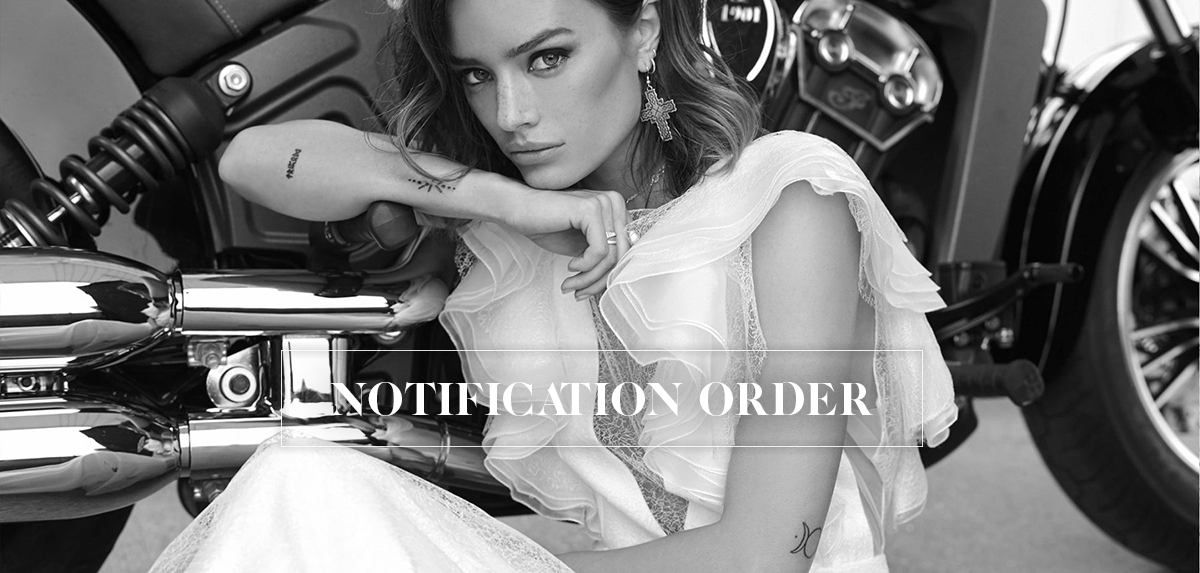
<style>
.page{position:relative;width:1200px;height:573px}
.page>*{position:absolute;margin:0}
.t1{font:48px "CaslonCP";color:#ffffff;text-transform:uppercase}
</style>
<div class="page">
<p class="t1" style="left:330px;top:382px;width:544px;height:35px">Notification ORDER</p>
</div>
